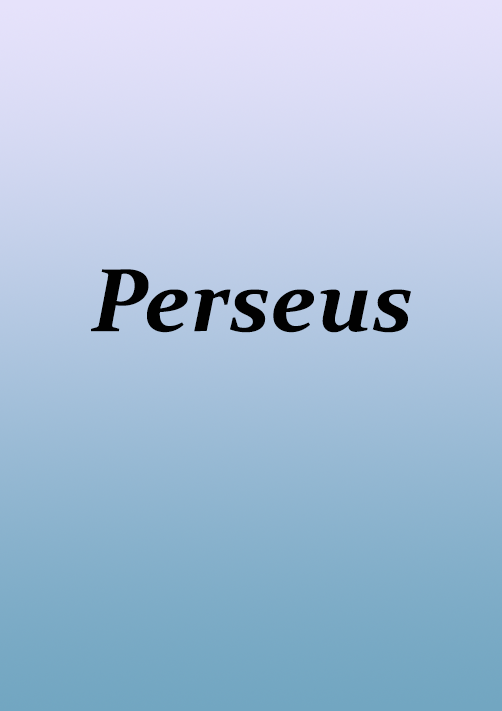
<style>
.page{position:relative;width:502px;height:711px}
.page>*{position:absolute;margin:0}
.t1{font:90px "Constantia-BoldItalic";color:#010101}
</style>
<div class="page">
<p class="t1" style="left:91px;top:269px;width:320px;height:64px">Perseus</p>
</div>
